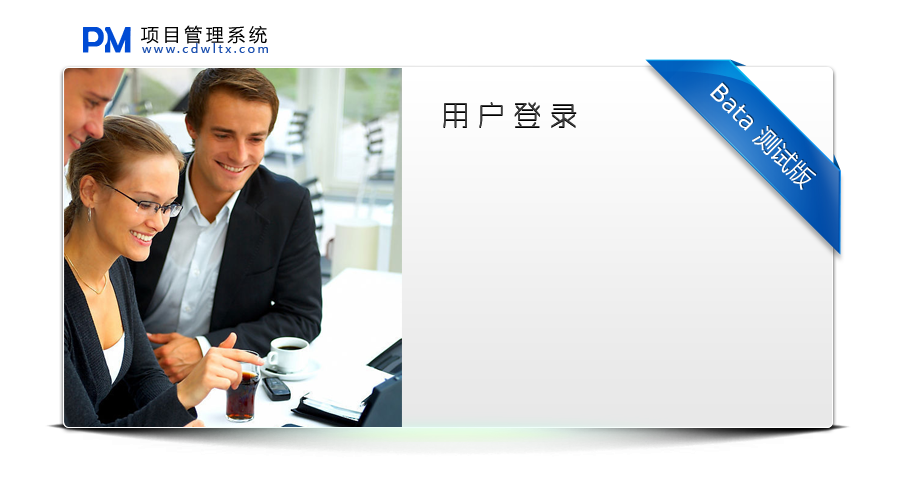
<style>
.page{position:relative;width:900px;height:500px;background:#ffffff}
.page>*{position:absolute;margin:0}
.t1{font:36px "BerlinSansFB-Reg";color:#004bd4;font-weight:bold}
.t2{font:18px "MicrosoftYaHei";letter-spacing:0.2em}
.t3{font:18px "MicrosoftYaHei";letter-spacing:0.2em;color:#000000}
.t4{font:12px "MicrosoftYaHei";letter-spacing:0.2em}
.t5{font:12px "MicrosoftYaHei";letter-spacing:0.2em;color:#1b4fae}
.t6{font:30px "ZHSRXT--GBK1-0";letter-spacing:0.2em;color:#3e3e3e}
.t7{font:30px "ZHSRXT--GBK1-0";letter-spacing:0.2em;color:#000000}
</style>
<div class="page">
<p class="t1" style="left:83px;top:27px;width:21px;height:26px">P</p>
<p class="t2" style="left:141px;top:26px;width:126px;height:19px">项目管理系统</p>
<p class="t3" style="left:141px;top:25px;width:126px;height:19px">项目管理系统</p>
<p class="t4" style="left:142px;top:44px;width:126px;height:10px">www.cdwltx.com</p>
<p class="t5" style="left:142px;top:43px;width:126px;height:10px">www.cdwltx.com</p>
<p class="t6" style="left:443px;top:102px;width:134px;height:25px">用户登录</p>
<p class="t7" style="left:443px;top:103px;width:134px;height:25px">用户登录</p>
</div>
